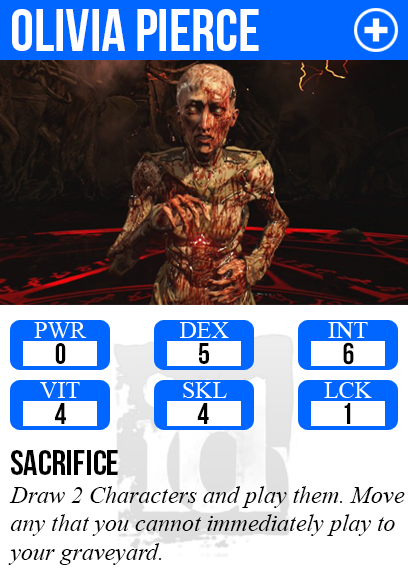
<style>
.page{position:relative;width:408px;height:585px;background:#ffffff}
.page>*{position:absolute;margin:0}
.t1{font:60px "BebasNeue";color:#ffffff}
.t2{font:29.9px "BebasNeue";color:#000000}
.t3{font:36px "BebasNeue";color:#000000}
.t4{font:24px "TimesNewRomanPS-ItalicMT";color:#000000}
</style>
<div class="page">
<p class="t1" style="left:12px;top:9px;width:247px;height:42px">olivia pierce</p>
<p class="t2" style="left:343px;top:342px;width:11px;height:23px">6</p>
<p class="t2" style="left:55px;top:343px;width:11px;height:21px">0</p>
<p class="t2" style="left:199px;top:343px;width:10px;height:21px">5</p>
<p class="t2" style="left:55px;top:403px;width:11px;height:21px">4</p>
<p class="t2" style="left:197px;top:403px;width:12px;height:21px">4</p>
<p class="t2" style="left:344px;top:403px;width:7px;height:21px">1</p>
<p class="t3" style="left:11px;top:450px;width:107px;height:25px">sacrifice</p>
<p class="t4" style="left:8px;top:486px;width:397px;height:79px">Draw 2 Characters and play them. Move<br>any that you cannot immediately play to<br>your graveyard.</p>
</div>
